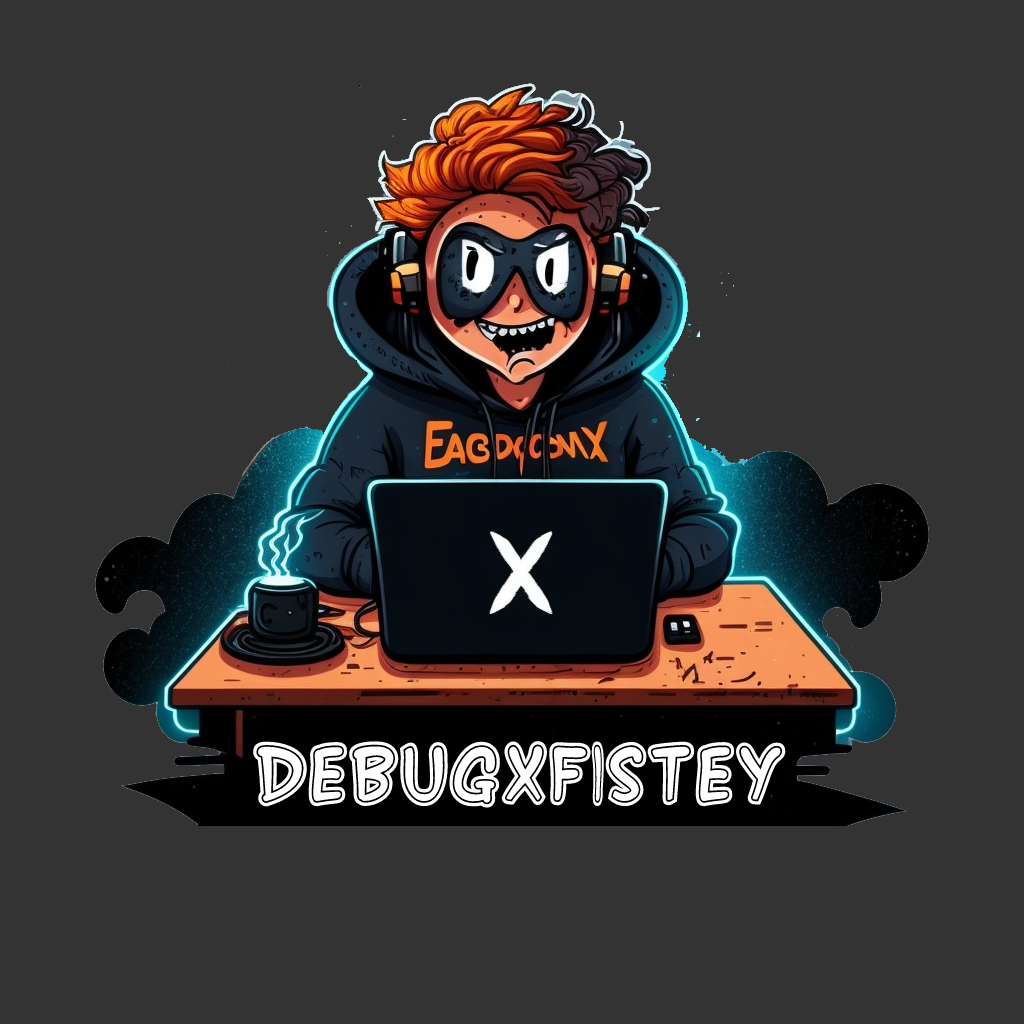
<style>
.page{position:relative;width:1024px;height:1024px;background:#333333}
.page>*{position:absolute;margin:0}
.t1{font:96.1px "SFWonderComicInline";color:#ffffff}
</style>
<div class="page">
<p class="t1" style="left:253px;top:741px;width:533px;height:67px">DebugxFistey</p>
</div>
